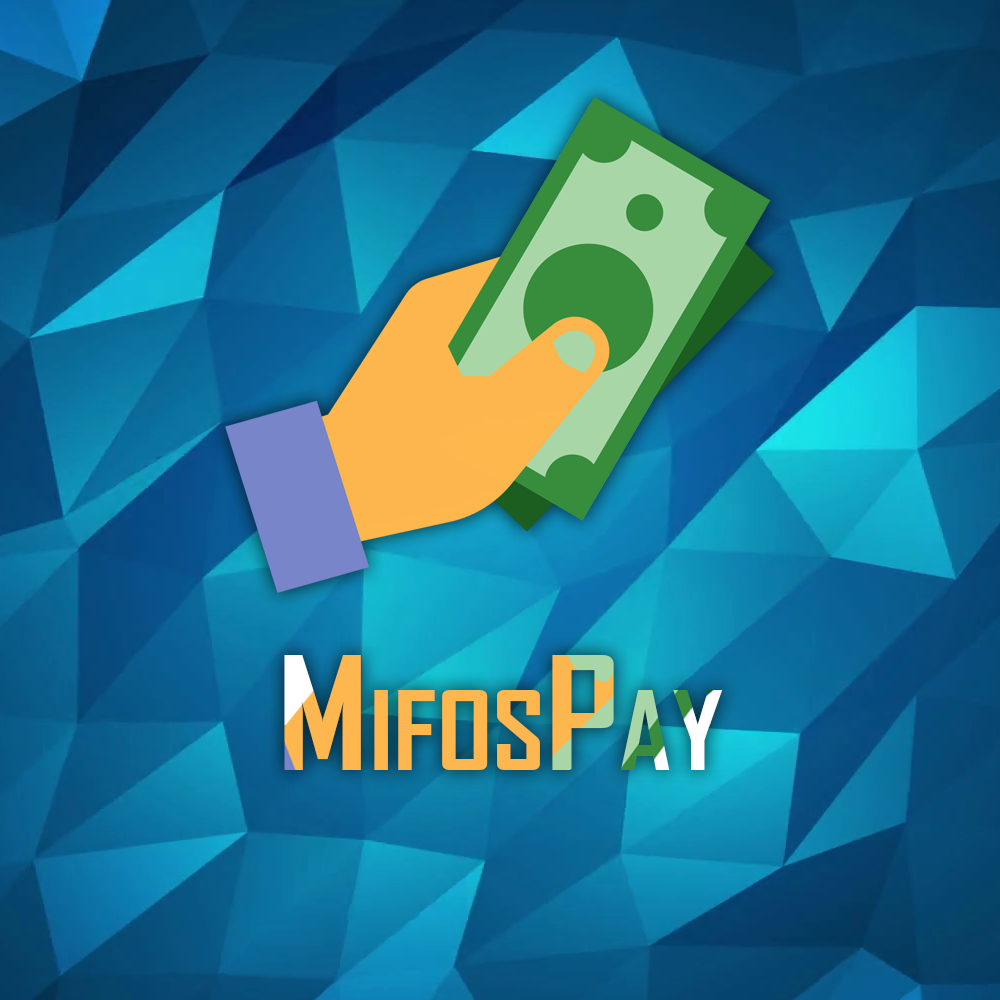
<style>
.page{position:relative;width:1000px;height:1000px}
.page>*{position:absolute;margin:0}
.t1{font:150.4px "AgencyFB-Bold";font-variant:small-caps;scale:1.1 1}
</style>
<div class="page">
<p class="t1" style="left:284px;top:655px;width:438px;height:115px">MifosPay</p>
</div>
